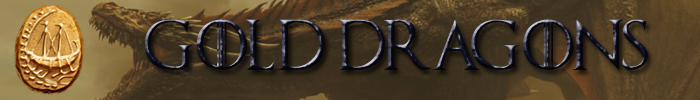
<style>
.page{position:relative;width:700px;height:100px}
.page>*{position:absolute;margin:0}
.t1{font:50px "GameofThrones"}
</style>
<div class="page">
<p class="t1" style="left:144px;top:19px;width:504px;height:51px">GOLD DRAGONS</p>
</div>
